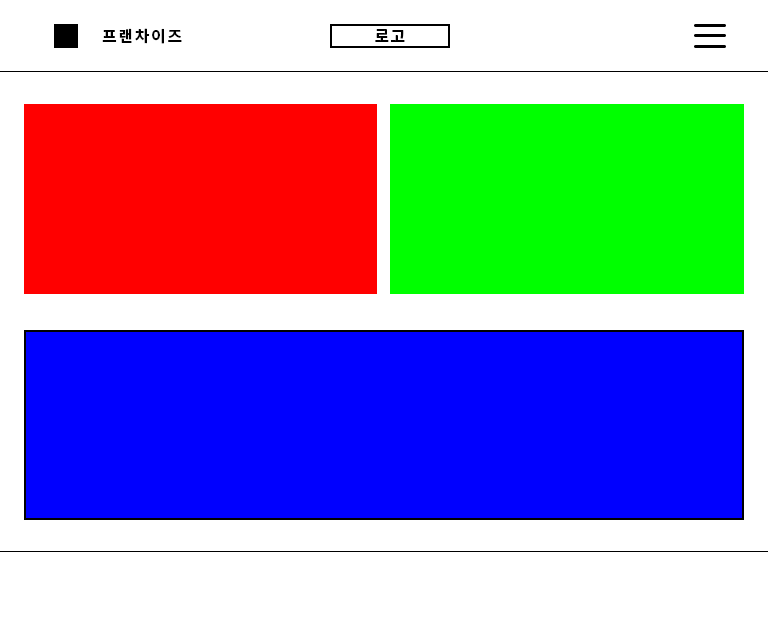
<style>
.page{position:relative;width:768px;height:632px;background:#ffffff}
.page>*{position:absolute;margin:0}
.t1{font:16px "NotoSansKR-Bold";letter-spacing:0.1em;color:#000000}
</style>
<div class="page">
<p class="t1" style="left:102px;top:28px;width:80px;height:16px">프랜차이즈</p>
<p class="t1" style="left:375px;top:29px;width:30px;height:13px">로고</p>
</div>
